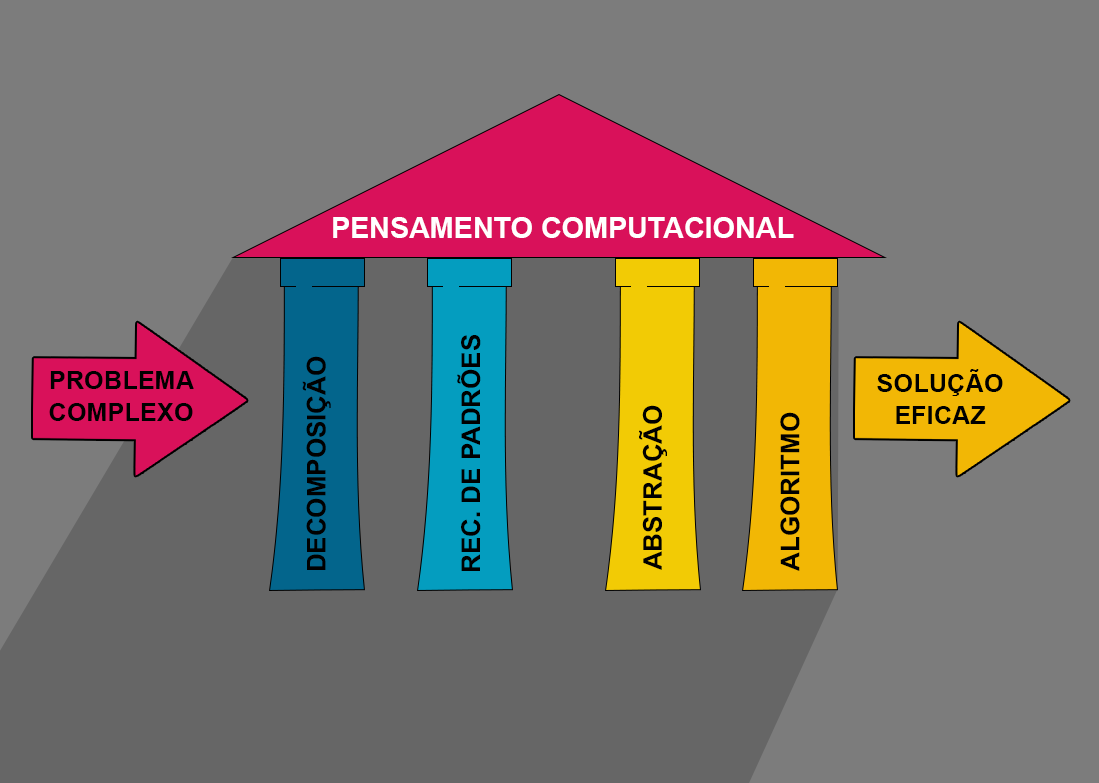
<style>
.page{position:relative;width:1099px;height:783px;background:#7c7c7c}
.page>*{position:absolute;margin:0}
.t1{font:28.7px "Arial-BoldMT";color:#ffffff}
.t2{font:25.9px "Arial-BoldMT";color:#000000}
.t3{font:25.4px/32.2px "Arial-BoldMT";color:#000000}
</style>
<div class="page">
<p class="t1" style="left:333px;top:217px;width:461px;height:21px">PENSAMENTO COMPUTACIONAL</p>
<p class="t2" style="left:457px;top:335px;width:24px;height:236px;rotate:-90deg">REC. DE PADRÕES</p>
<p class="t2" style="left:302px;top:356px;width:29px;height:214px;rotate:-90deg">DECOMPOSIÇÃO</p>
<p class="t3" style="left:49px;top:371px;width:145px;height:50px;text-align:center">PROBLEMA<br>COMPLEXO</p>
<p class="t3" style="left:877px;top:369px;width:126px;height:55px;text-align:center">SOLUÇÃO<br>EFICAZ</p>
<p class="t2" style="left:639px;top:405px;width:28px;height:165px;rotate:-90deg">ABSTRAÇÃO</p>
<p class="t2" style="left:780px;top:412px;width:20px;height:159px;rotate:-90deg">ALGORITMO</p>
</div>
